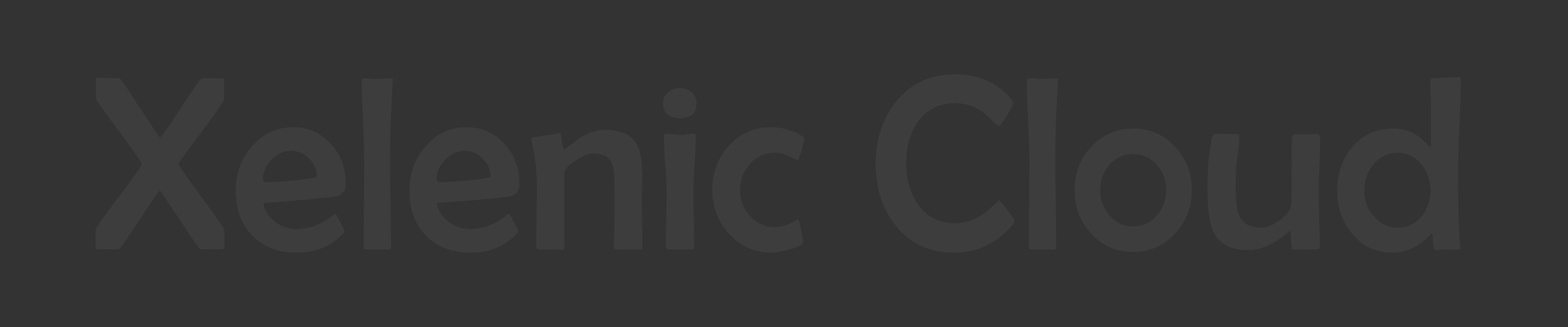
<style>
.page{position:relative;width:1568px;height:327px;background:#333333}
.page>*{position:absolute;margin:0}
.t1{font:60.1px "BerlinSansFB-Reg";color:#3d3d3d}
</style>
<div class="page">
<p class="t1" style="left:95px;top:74px;width:1366px;height:179px">Xelenic Cloud</p>
</div>
